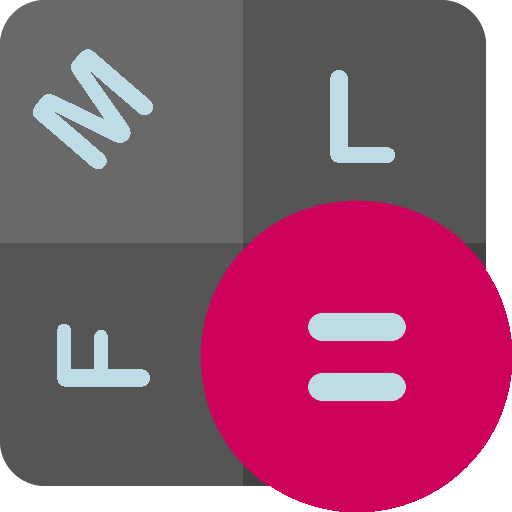
<style>
.page{position:relative;width:512px;height:512px;background:#555555}
.page>*{position:absolute;margin:0}
.t1{font:128px "ArialRoundedMTBold";color:#bedce6}
</style>
<div class="page">
<p class="t1" style="left:33px;top:49px;width:120px;height:120px;rotate:-49deg">M</p>
<p class="t1" style="left:330px;top:70px;width:65px;height:93px">L</p>
<p class="t1" style="left:57px;top:324px;width:93px;height:63px;rotate:-90deg">F</p>
</div>
